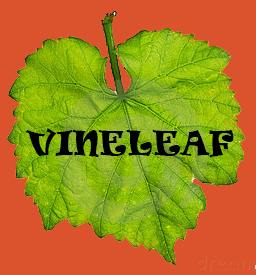
<style>
.page{position:relative;width:256px;height:275px;background:#da532d}
.page>*{position:absolute;margin:0}
.t1{font:32px "Ravie";color:#000000}
</style>
<div class="page">
<p class="t1" style="left:25px;top:128px;width:209px;height:29px">VINELEAF</p>
</div>
